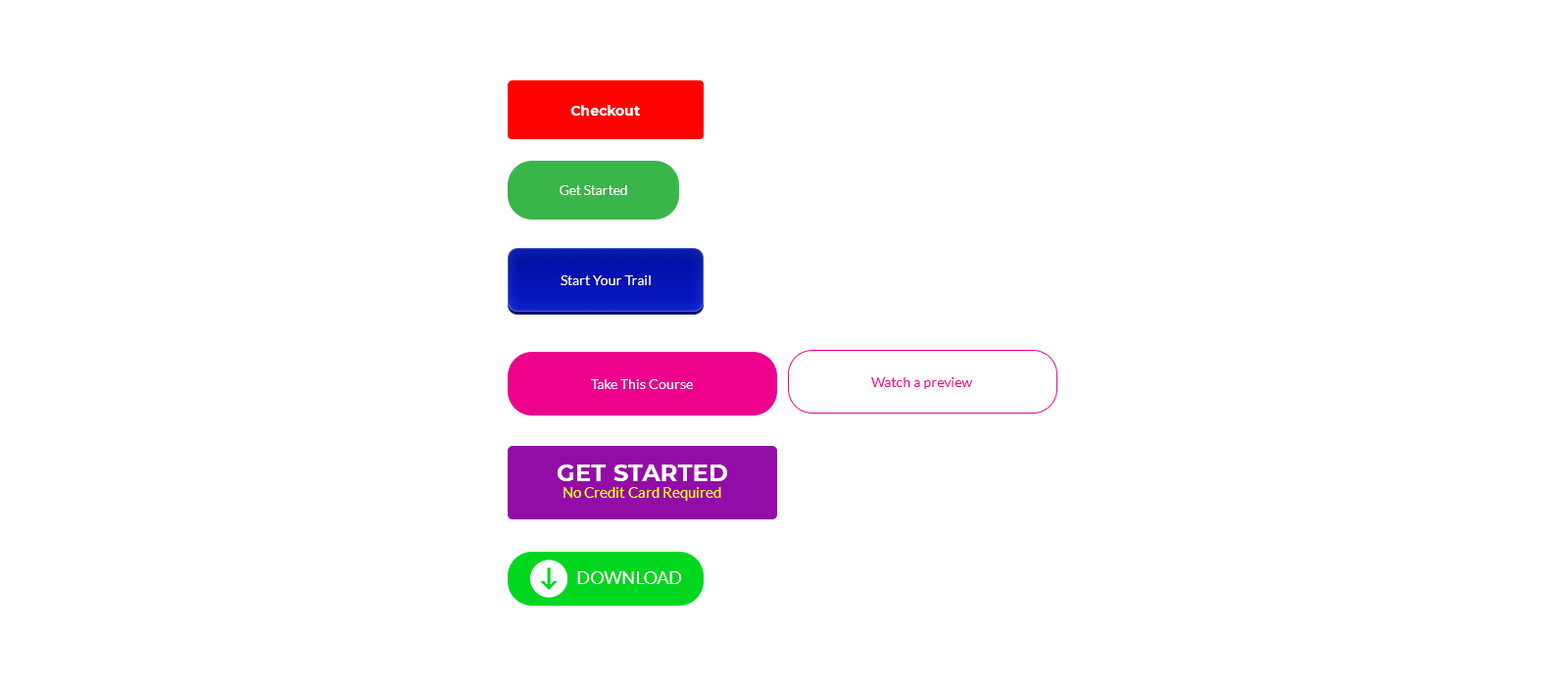
<style>
.page{position:relative;width:1568px;height:686px;background:#ffffff}
.page>*{position:absolute;margin:0}
.t1{font:13.7px "Montserrat-Bold";color:#ffffff}
.t2{font:13.7px "Lato-Regular";color:#ffffff}
.t3{font:13.7px "Lato-Regular";color:#ec008c}
.t4{font:23.5px "Montserrat-Bold";letter-spacing:0.01em;color:#ffffff;text-transform:uppercase}
.t5{font:14.7px "Lato-Regular";color:#f0ff00}
.t6{font:17.6px "Lato-Regular";color:#fefefe;text-transform:uppercase}
</style>
<div class="page">
<p class="t1" style="left:570px;top:105px;width:70px;height:11px">Checkout</p>
<p class="t2" style="left:560px;top:185px;width:67px;height:10px">Get Started</p>
<p class="t2" style="left:561px;top:275px;width:90px;height:10px">Start Your Trail</p>
<p class="t3" style="left:871px;top:377px;width:101px;height:12px">Watch a preview</p>
<p class="t2" style="left:591px;top:379px;width:102px;height:10px">Take This Course</p>
<p class="t4" style="left:558px;top:465px;width:169px;height:16px">Get Started</p>
<p class="t5" style="left:564px;top:487px;width:157px;height:14px">No Credit Card Required</p>
<p class="t6" style="left:577px;top:571px;width:105px;height:13px">Download</p>
</div>
